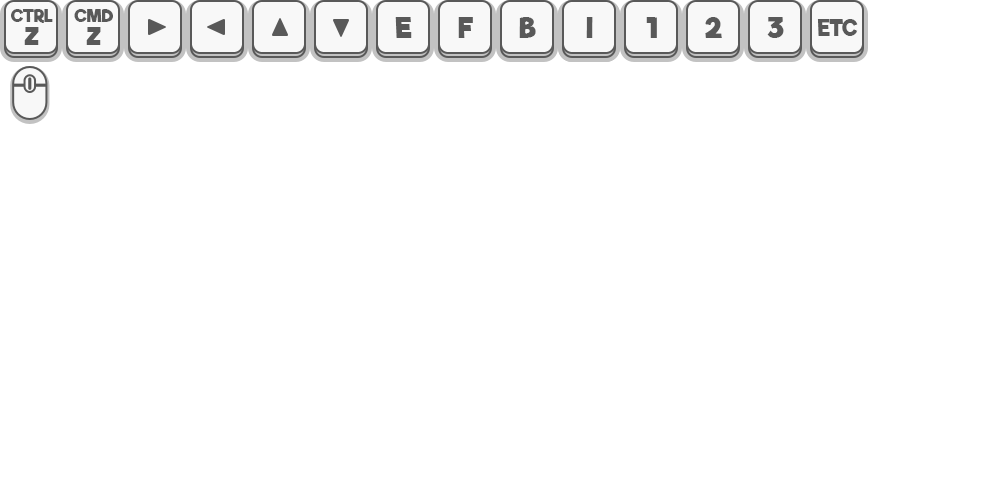
<style>
.page{position:relative;width:1000px;height:500px;background:#ffffff}
.page>*{position:absolute;margin:0}
.t1{font:17px/18px "RifficFree-Bold";color:#595959}
.t2{font:24px/18px "RifficFree-Bold";color:#595959}
.t3{font:28px "RifficFree-Bold";color:#595959}
.t4{font:21px "RifficFree-Bold";color:#595959}
</style>
<div class="page">
<p class="t1" style="left:11px;top:9px;width:42px;height:36px;text-align:center">CTRL<br><span class="t2">Z</span></p>
<p class="t1" style="left:74px;top:9px;width:39px;height:36px;text-align:center">CMD<br><span class="t2">Z</span></p>
<p class="t3" style="left:395px;top:17px;width:17px;height:21px">E</p>
<p class="t3" style="left:458px;top:17px;width:15px;height:21px">F</p>
<p class="t3" style="left:519px;top:17px;width:17px;height:21px">B</p>
<p class="t3" style="left:586px;top:17px;width:7px;height:21px">I</p>
<p class="t3" style="left:586px;top:17px;width:7px;height:21px">I</p>
<p class="t3" style="left:646px;top:17px;width:11px;height:21px">1</p>
<p class="t3" style="left:705px;top:17px;width:17px;height:21px">2</p>
<p class="t3" style="left:767px;top:17px;width:17px;height:21px">3</p>
<p class="t4" style="left:817px;top:19px;width:41px;height:17px">ETC</p>
</div>
